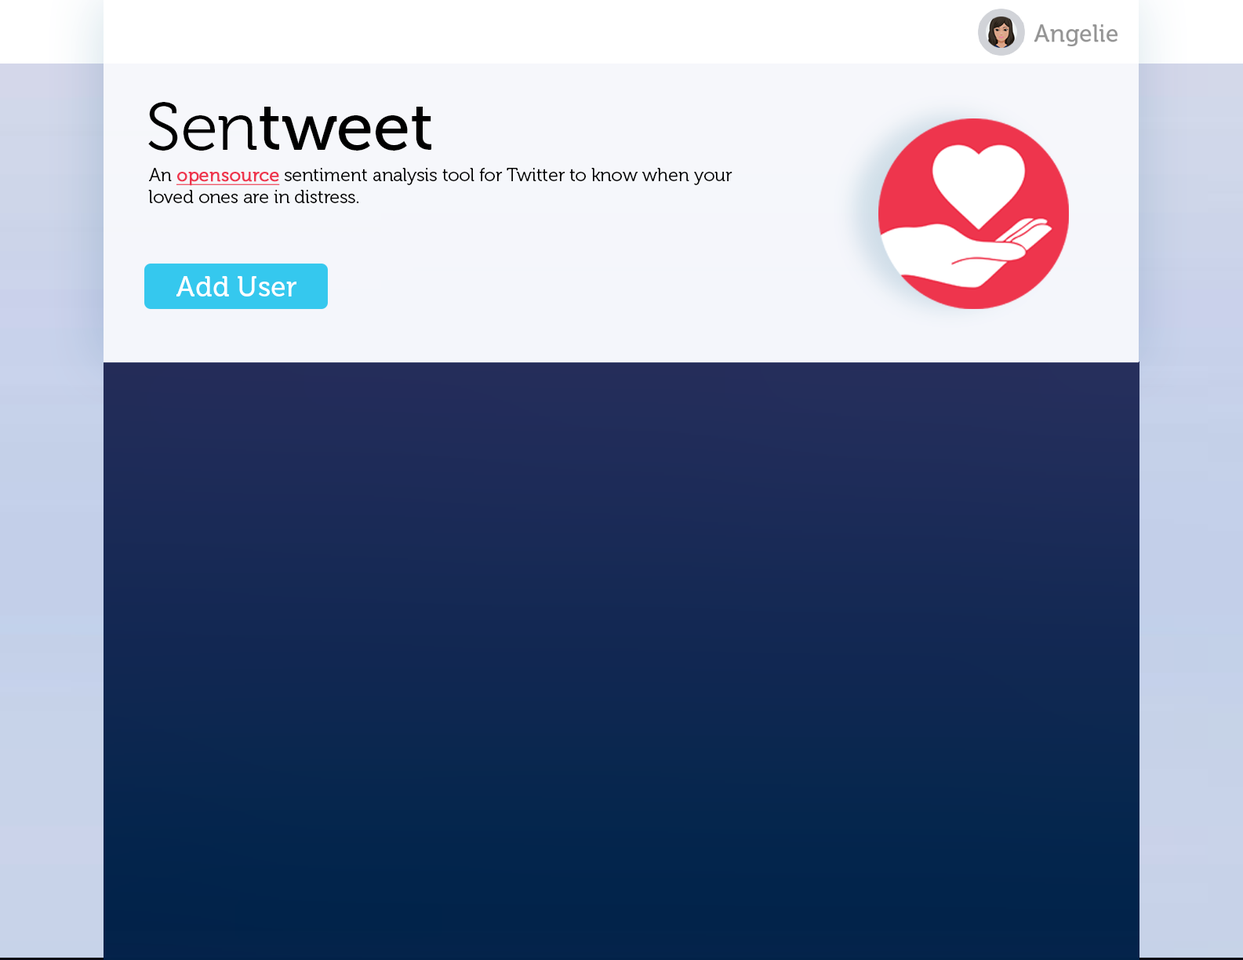
<style>
.page{position:relative;width:1243px;height:960px}
.page>*{position:absolute;margin:0}
.t1{font:67px "Museo-500";color:#000000}
.t2{font:67px "Museo-300";color:#000000}
.t3{font:18.1px "Museo-300";color:#000000}
.t4{font:18.1px "Museo-300";color:#ee354d;font-weight:bold;text-decoration:underline}
.t5{font:28.2px "Museo-500";color:#ffffff}
</style>
<div class="page">
<p class="t1" style="left:148px;top:102px;width:283px;height:49px"><span class="t2">Sen</span>tweet</p>
<p class="t3" style="left:148px;top:168px;width:584px;height:35px">An <span class="t4">opensource</span> sentiment analysis tool for Twitter to know when your<br>loved ones are in distress.</p>
<p class="t5" style="left:176px;top:276px;width:120px;height:20px">Add User</p>
</div>
